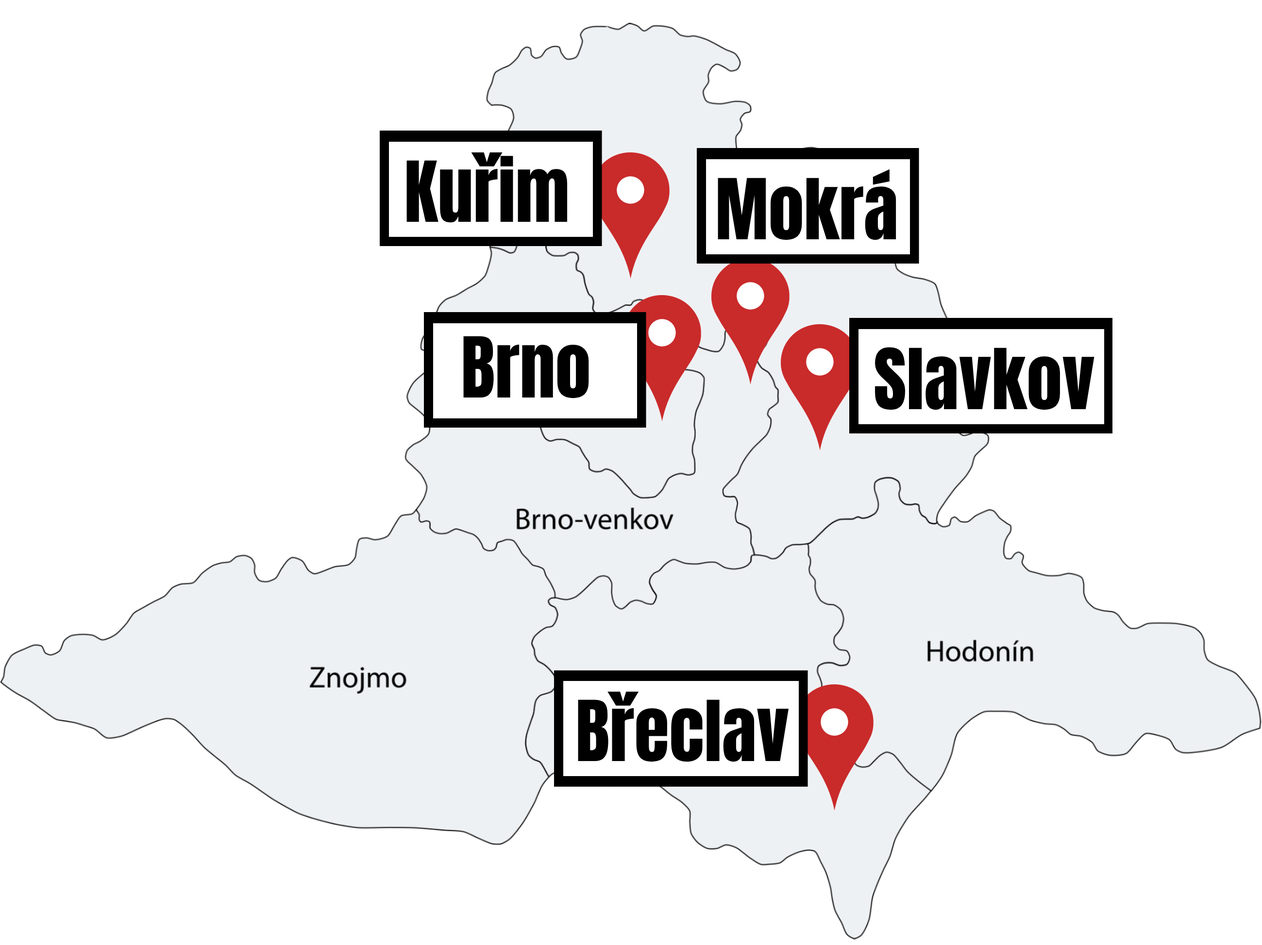
<style>
.page{position:relative;width:1262px;height:945px;background:#ffffff}
.page>*{position:absolute;margin:0}
.t1{font:71.4px "Anton-Regular";color:#000000}
</style>
<div class="page">
<p class="t1" style="left:406px;top:152px;width:161px;height:71px">Kuřim</p>
<p class="t1" style="left:717px;top:169px;width:179px;height:71px">Mokrá</p>
<p class="t1" style="left:463px;top:336px;width:126px;height:63px">Brno</p>
<p class="t1" style="left:875px;top:347px;width:219px;height:63px">Slavkov</p>
<p class="t1" style="left:578px;top:691px;width:210px;height:71px">Břeclav</p>
</div>
